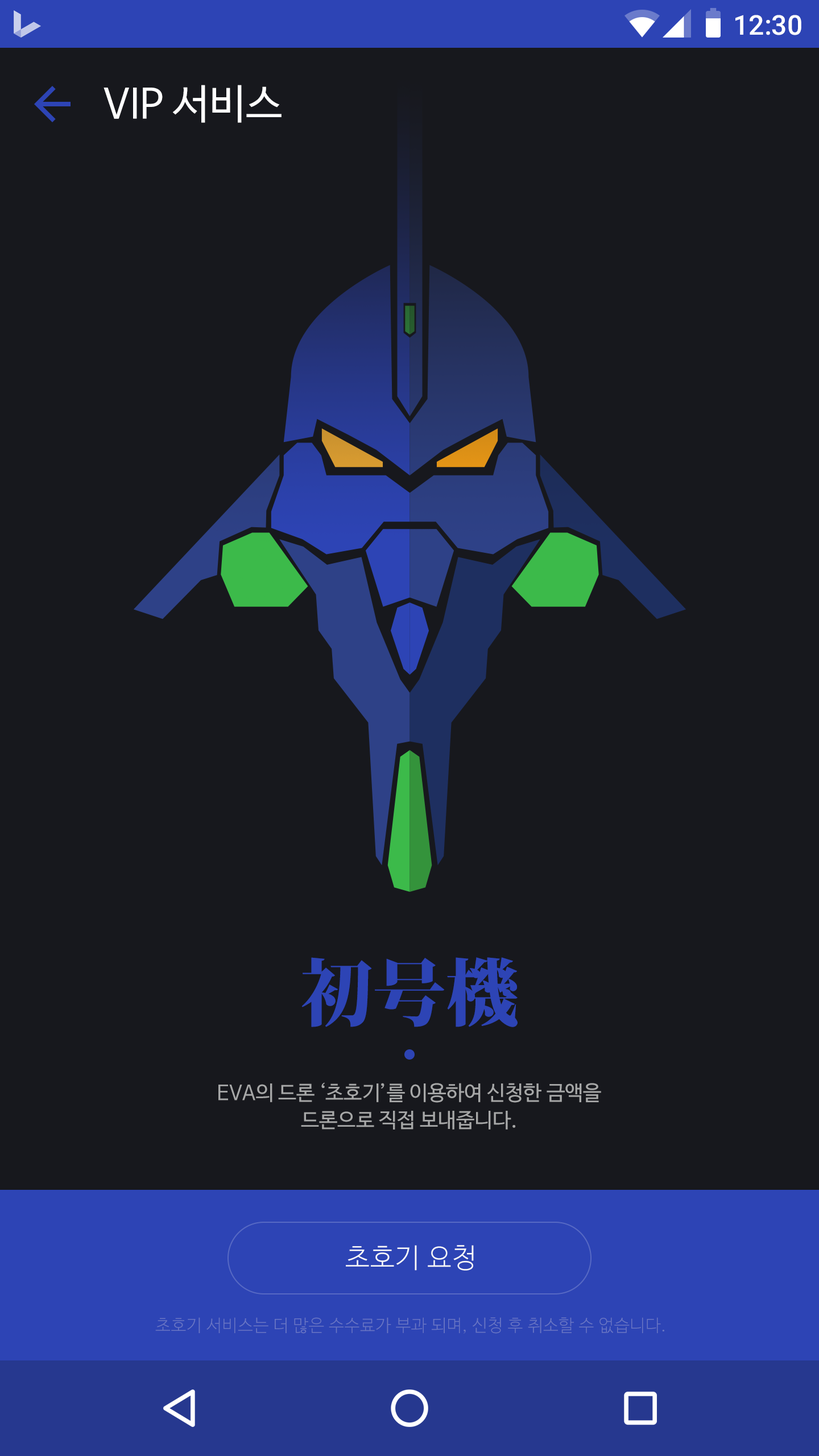
<style>
.page{position:relative;width:819px;height:1456px;background:#17181d}
.page>*{position:absolute;margin:0}
.t1{font:27.3px "Roboto-Medium";color:#ffffff}
.t2{font:40.9px "NanumBarunGothic";color:#ffffff}
.t3{font:72.8px "KozMinPro-Heavy";color:#2d44b5}
.t4{font:20.5px/27.3px "NanumBarunGothic";color:#a7a8a8}
.t5{font:27.3px "NanumBarunGothicLight";letter-spacing:0.025em;color:#fafafa}
.t6{font:17.1px "NanumBarunGothicLight";letter-spacing:0.025em;color:#6976c4}
</style>
<div class="page">
<p class="t1" style="left:735px;top:15px;width:66px;height:20px">12:30</p>
<p class="t2" style="left:104px;top:85px;width:178px;height:38px">VIP 서비스</p>
<p class="t3" style="left:301px;top:957px;width:217px;height:70px">初号機</p>
<p class="t4" style="left:218px;top:1082px;width:383px;height:48px;text-align:center">EVA의 드론 ‘초호기’를 이용하여 신청한 금액을<br>드론으로 직접 보내줍니다.</p>
<p class="t5" style="left:346px;top:1245px;width:128px;height:26px">초호기 요청</p>
<p class="t6" style="left:155px;top:1317px;width:509px;height:17px">초호기 서비스는 더 많은 수수료가 부과 되며, 신청 후 취소할 수 없습니다.</p>
</div>
